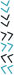
<style>
.page{position:relative;width:14px;height:75px;background:#ffffff}
.page>*{position:absolute;margin:0}
.t1{font:16px "ThrowMyHandsUpintheAir";color:#3fa7b8;text-transform:uppercase}
.t2{font:16px "ThrowMyHandsUpintheAir";color:#242b2c;text-transform:uppercase}
</style>
<div class="page">
<p class="t1" style="left:0px;top:0px;width:10px;height:13px;rotate:90deg">&gt;&gt;</p>
<p class="t2" style="left:0px;top:14px;width:10px;height:13px;rotate:90deg">&gt;&gt;</p>
<p class="t2" style="left:0px;top:31px;width:14px;height:10px">&gt;&gt;</p>
<p class="t2" style="left:0px;top:54px;width:14px;height:9px;rotate:-180deg">&gt;&gt;</p>
<p class="t1" style="left:0px;top:42px;width:14px;height:10px">&gt;&gt;</p>
<p class="t1" style="left:0px;top:65px;width:14px;height:9px;rotate:-180deg">&gt;&gt;</p>
</div>
